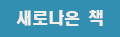
<style>
.page{position:relative;width:120px;height:37px;background:#328fb2}
.page>*{position:absolute;margin:0}
.t1{font:16px "HeadlineR-HM";color:#efede7}
</style>
<div class="page">
<p class="t1" style="left:16px;top:10px;width:87px;height:16px">새로나온 책</p>
</div>
